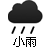
<style>
.page{position:relative;width:50px;height:48px;background:#ffffff}
.page>*{position:absolute;margin:0}
.t1{font:12px "OPPOSans-R";color:#000000}
</style>
<div class="page">
<p class="t1" style="left:13px;top:36px;width:23px;height:11px">小雨</p>
</div>
